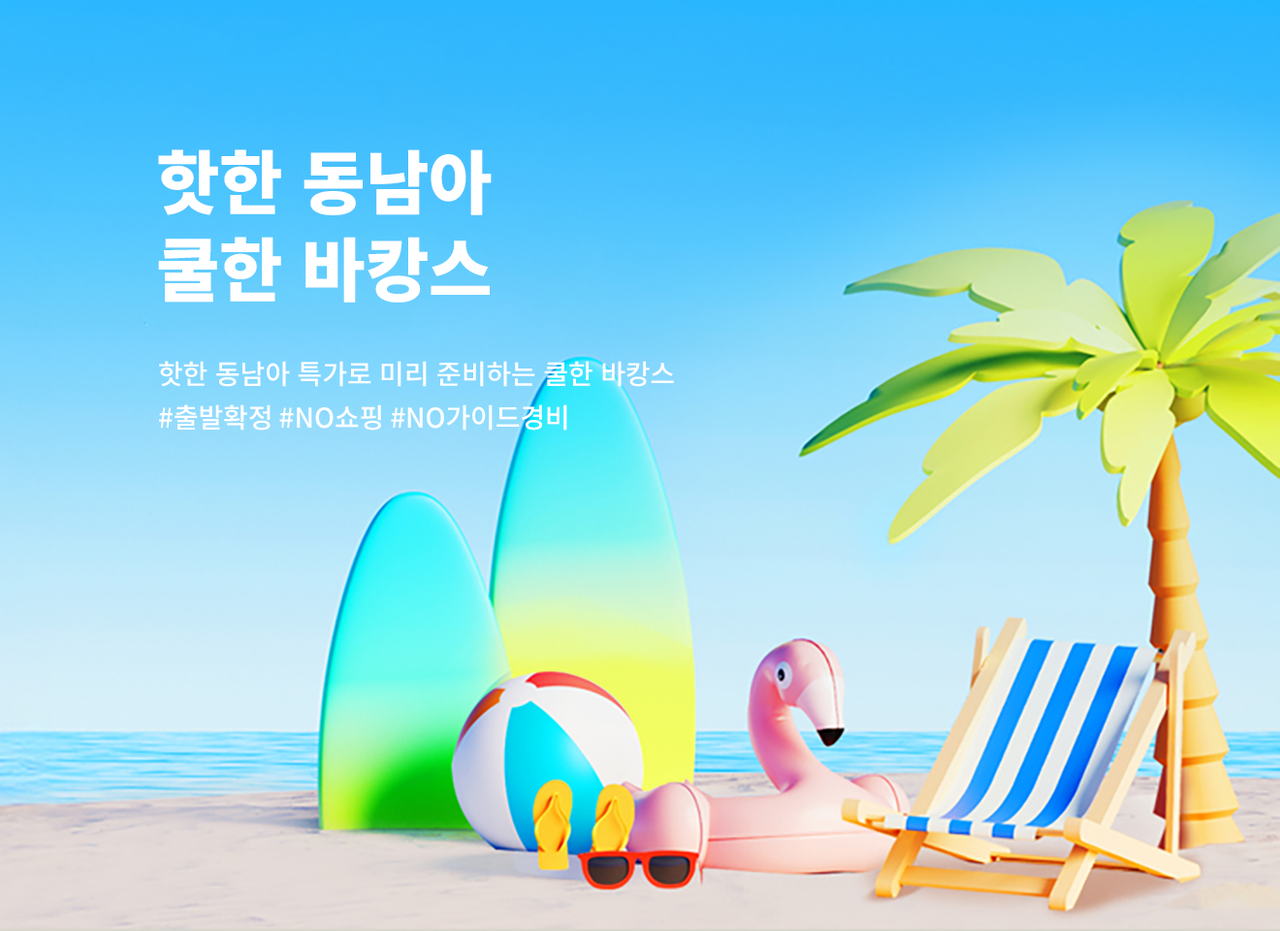
<style>
.page{position:relative;width:1280px;height:931px}
.page>*{position:absolute;margin:0}
.t1{font:69.4px/87.3px "NotoSansKR-Black";color:#ffffff}
.t2{font:27.2px/43.7px "NotoSansKR-Medium";color:#ffffff}
</style>
<div class="page">
<p class="t1" style="left:158px;top:149px;width:334px;height:154px;text-align:center">핫한 동남아<br>쿨한 바캉스</p>
<p class="t2" style="left:159px;top:361px;width:515px;height:70px">핫한 동남아 특가로 미리 준비하는 쿨한 바캉스<br>#출발확정 #NO쇼핑 #NO가이드경비</p>
</div>
